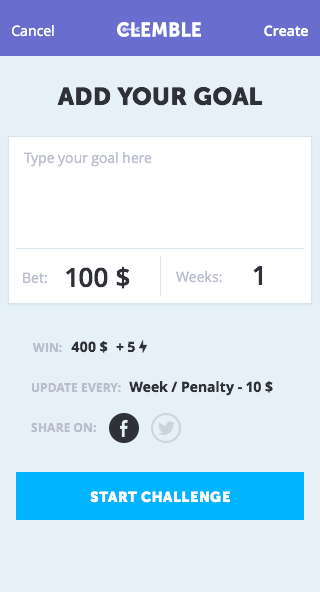
<style>
.page{position:relative;width:320px;height:592px;background:#e6f1f7}
.page>*{position:absolute;margin:0}
.t1{font:14px "OpenSans";color:#ffffff}
.t2{font:14px "OpenSans-Semibold";color:#ffffff}
.t3{font:24px "MuseoSans-900";letter-spacing:0.025em;color:#2f3139;text-transform:uppercase}
.t4{font:14px "OpenSans";color:#b9bdcd}
.t5{font:26px "OpenSans-Semibold";color:#2f3139;text-transform:uppercase}
.t6{font:26px "OpenSans-Semibold";color:#2f3139}
.t7{font:14px "OpenSans-Bold";color:#2f3139;text-transform:uppercase}
.t8{font:12px "OpenSans-Bold";color:#b9bdcd;text-transform:uppercase}
.t9{font:14px "OpenSans-Bold";color:#2f3139}
.t10{font:14px "MuseoSans-900";letter-spacing:0.05em;color:#ffffff;text-transform:uppercase}
</style>
<div class="page">
<p class="t1" style="left:12px;top:25px;width:42px;height:12px">Cancel</p>
<p class="t2" style="left:264px;top:25px;width:44px;height:12px">Create</p>
<p class="t3" style="left:57px;top:87px;width:206px;height:19px">ADD YOUR GOAL</p>
<p class="t4" style="left:23px;top:152px;width:129px;height:15px">Type your goal here</p>
<p class="t5" style="left:66px;top:266px;width:64px;height:23px">100 $</p>
<p class="t6" style="left:253px;top:265px;width:10px;height:20px">1</p>
<p class="t4" style="left:23px;top:272px;width:24px;height:12px">Bet:</p>
<p class="t4" style="left:176px;top:271px;width:46px;height:12px">Weeks:</p>
<p class="t7" style="left:71px;top:341px;width:37px;height:12px">400 $</p>
<p class="t7" style="left:116px;top:341px;width:19px;height:12px">+ 5</p>
<p class="t8" style="left:32px;top:343px;width:30px;height:10px">Win:</p>
<p class="t8" style="left:31px;top:383px;width:90px;height:10px">Update every:</p>
<p class="t9" style="left:129px;top:381px;width:144px;height:15px">Week / Penalty - 10 $</p>
<p class="t8" style="left:31px;top:422px;width:65px;height:11px">Share on:</p>
<p class="t10" style="left:90px;top:491px;width:140px;height:12px">start challenge</p>
</div>
